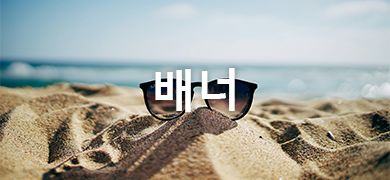
<style>
.page{position:relative;width:390px;height:180px}
.page>*{position:absolute;margin:0}
.t1{font:45px "MalgunGothicBold";color:#ffffff}
</style>
<div class="page">
<p class="t1" style="left:155px;top:68px;width:80px;height:44px">배너</p>
</div>
